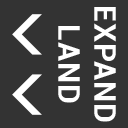
<style>
.page{position:relative;width:128px;height:128px;background:#333333}
.page>*{position:absolute;margin:0}
.t1{font:30px "Roboto-Bold";letter-spacing:0.04em;color:#ffffff}
</style>
<div class="page">
<p class="t1" style="left:58px;top:7px;width:58px;height:115px;text-align:center">EXPAND<br>LAND</p>
</div>
